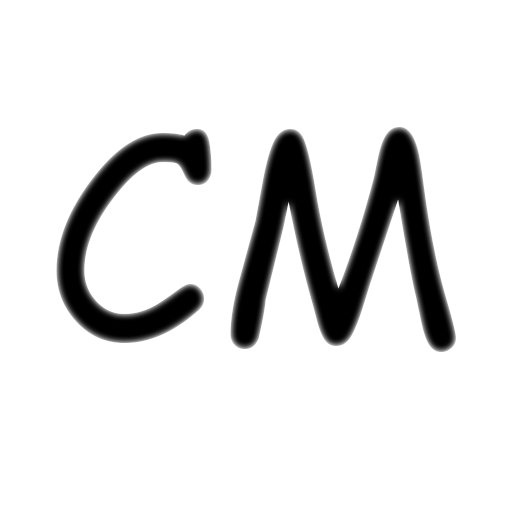
<style>
.page{position:relative;width:512px;height:512px;background:#ffffff}
.page>*{position:absolute;margin:0}
.t1{font:285.3px "ComicSansMS"}
</style>
<div class="page">
<p class="t1" style="left:56px;top:127px;width:400px;height:225px">CM</p>
</div>
